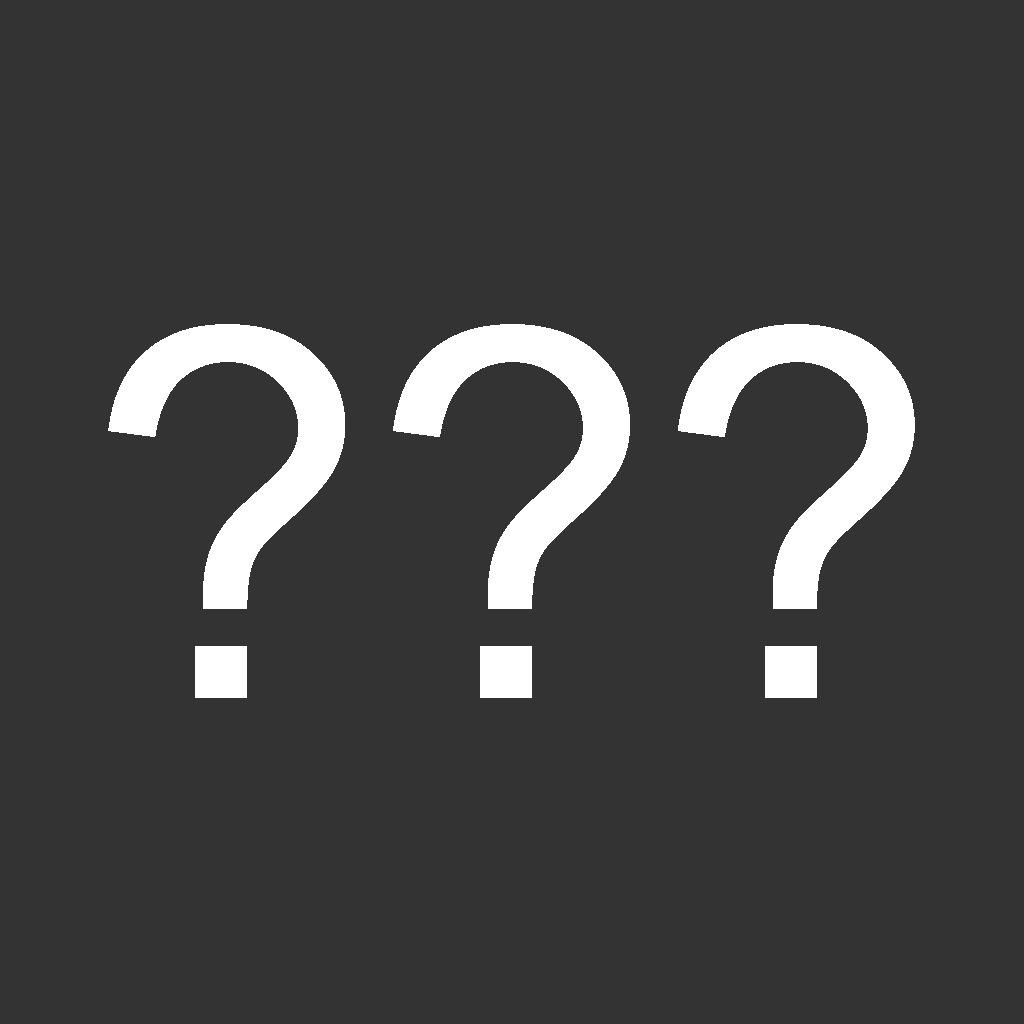
<style>
.page{position:relative;width:1024px;height:1024px;background:#333333}
.page>*{position:absolute;margin:0}
.t1{font:512px "ArialMT";color:#ffffff}
</style>
<div class="page">
<p class="t1" style="left:108px;top:324px;width:807px;height:374px">???</p>
</div>
